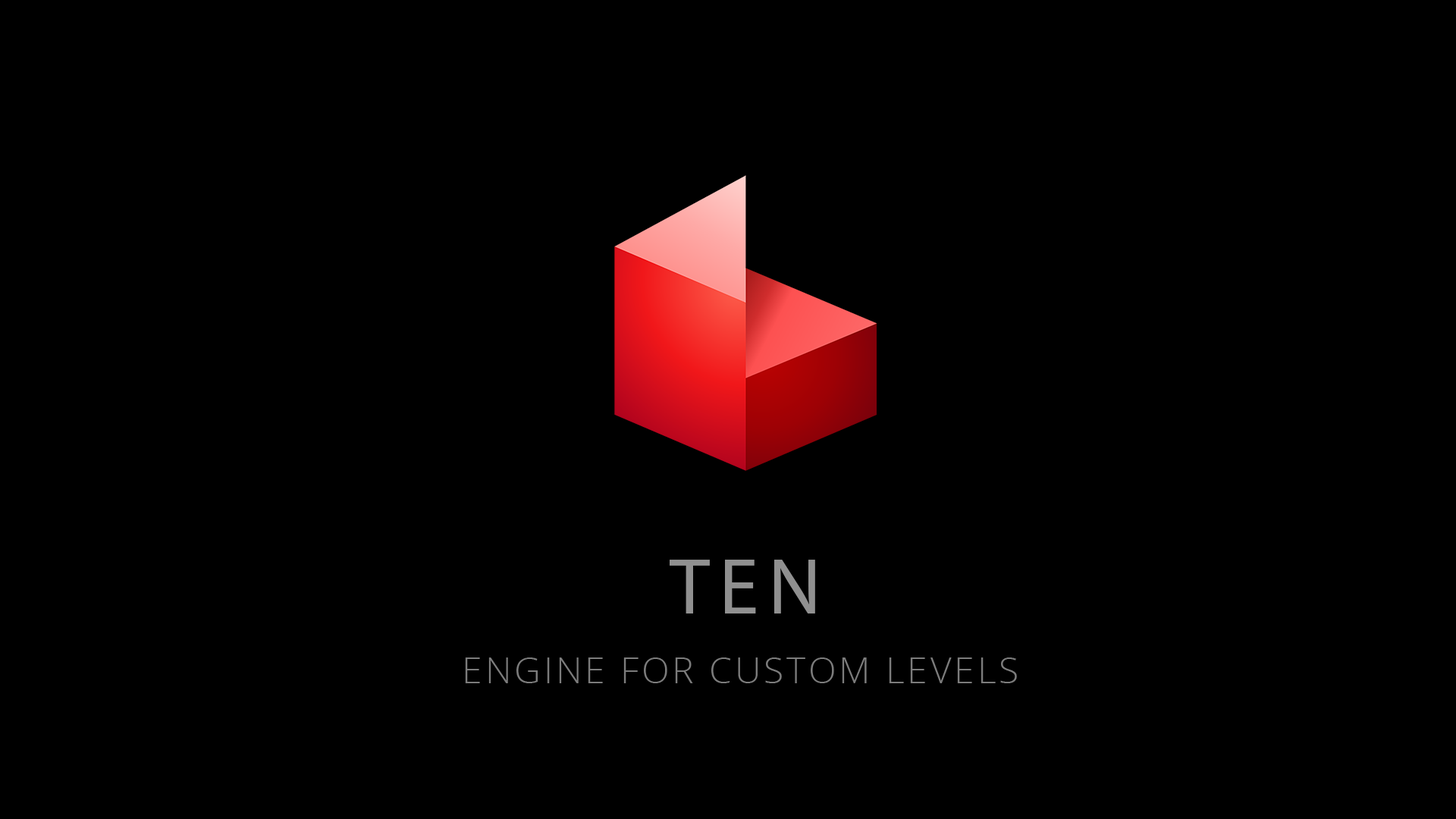
<style>
.page{position:relative;width:1456px;height:819px;background:#000000}
.page>*{position:absolute;margin:0}
.t1{font:80.4px "MyriadPro-Regular";letter-spacing:0.12em;color:#909090}
.t2{font:36.4px "OpenSans-Light";letter-spacing:0.08em;color:#7c7c7c}
</style>
<div class="page">
<p class="t1" style="left:670px;top:560px;width:145px;height:53px">TEN</p>
<p class="t2" style="left:465px;top:657px;width:552px;height:26px">ENGINE FOR CUSTOM LEVELS</p>
</div>
